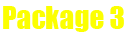
<style>
.page{position:relative;width:127px;height:36px;background:#ffffff}
.page>*{position:absolute;margin:0}
.t1{font:29.2px "Impact";color:#fcff01}
</style>
<div class="page">
<p class="t1" style="left:3px;top:6px;width:121px;height:26px">Package 3</p>
</div>
